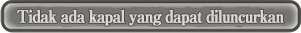
<style>
.page{position:relative;width:301px;height:33px}
.page>*{position:absolute;margin:0}
.t1{font:17px "RyuminPro-ExBold";letter-spacing:-0.08em;color:#ddd6d2;font-weight:bold;scale:0.9 1}
</style>
<div class="page">
<p class="t1" style="left:16px;top:9px;width:268px;height:17px">Tidak ada kapal yang dapat diluncurkan</p>
</div>
